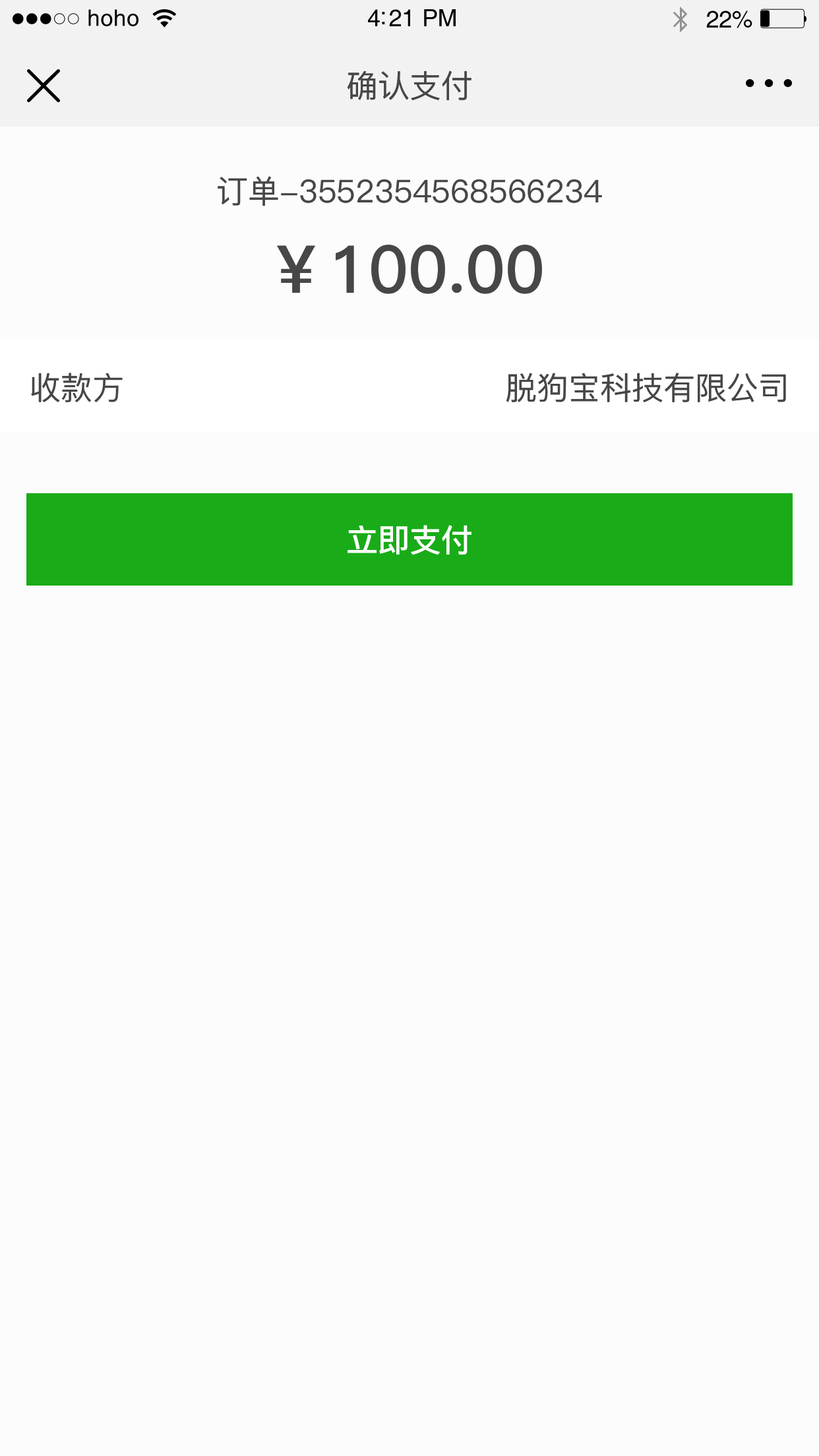
<style>
.page{position:relative;width:819px;height:1456px;background:#fdfcfd}
.page>*{position:absolute;margin:0}
.t1{font:22.8px "Helvetica";letter-spacing:0.02em;color:#000000}
.t2{font:23.8px "Helvetica";letter-spacing:-0.02em;color:#000000}
.t3{font:31.7px "PingFang-SC-Medium";color:#474747}
.t4{font:65.9px "PingFang-SC-Bold";color:#474747}
.t5{font:31.7px "PingFang-SC-Bold";color:#ffffff}
</style>
<div class="page">
<p class="t1" style="left:88px;top:9px;width:50px;height:17px">hoho</p>
<p class="t2" style="left:368px;top:9px;width:88px;height:17px">4:21 PM</p>
<p class="t2" style="left:706px;top:11px;width:46px;height:17px">22%</p>
<p class="t3" style="left:347px;top:71px;width:124px;height:29px">确认支付</p>
<p class="t3" style="left:218px;top:176px;width:384px;height:30px">订单-3552354568566234</p>
<p class="t4" style="left:277px;top:245px;width:265px;height:49px">￥100.00</p>
<p class="t3" style="left:31px;top:373px;width:92px;height:29px">收款方</p>
<p class="t3" style="left:506px;top:373px;width:280px;height:29px">脱狗宝科技有限公司</p>
<p class="t5" style="left:348px;top:525px;width:123px;height:30px">立即支付</p>
</div>
